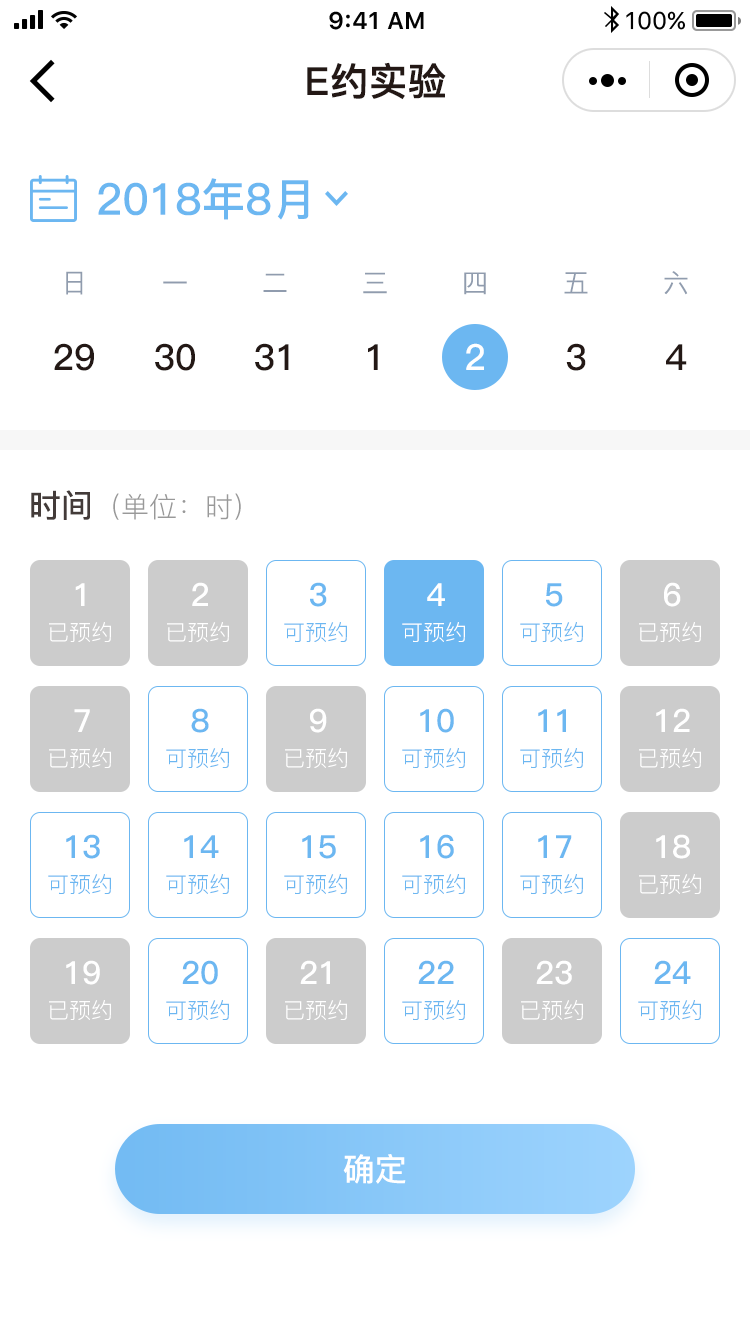
<style>
.page{position:relative;width:750px;height:1334px;background:#ffffff}
.page>*{position:absolute;margin:0}
.t1{font:38px "PingFang-SC-Bold";color:#231815;font-weight:bold}
.t2{font:44px "PingFang-SC-Bold";color:#6cb7f1}
.t3{font:26px "PingFang-SC-Medium";color:#909cae}
.t4{font:36px "PingFang-SC-Bold";color:#231815}
.t5{font:36px "PingFang-SC-Bold";color:#ffffff}
.t6{font:28px "PingFang-SC-Regular";color:#999999}
.t7{font:32px "PingFang-SC-Bold";color:#433b39}
.t8{font:32px "PingFang-SC-Bold";color:#ffffff}
.t9{font:32px "PingFang-SC-Bold";color:#6cb7f1}
.t10{font:22px "PingFang-SC-Regular";color:#ffffff}
.t11{font:22px "PingFang-SC-Regular";color:#6cb7f1}
</style>
<div class="page">
<p class="t1" style="left:307px;top:62px;width:139px;height:38px">E约实验</p>
<p class="t2" style="left:98px;top:178px;width:211px;height:42px">2018年8月</p>
<p class="t3" style="left:66px;top:271px;width:17px;height:24px">日</p>
<p class="t3" style="left:163px;top:281px;width:24px;height:3px">一</p>
<p class="t3" style="left:263px;top:273px;width:24px;height:19px">二</p>
<p class="t3" style="left:363px;top:272px;width:24px;height:22px">三</p>
<p class="t3" style="left:464px;top:272px;width:22px;height:23px">四</p>
<p class="t3" style="left:564px;top:272px;width:24px;height:22px">五</p>
<p class="t3" style="left:664px;top:271px;width:24px;height:24px">六</p>
<p class="t4" style="left:54px;top:343px;width:40px;height:28px">29</p>
<p class="t4" style="left:155px;top:343px;width:40px;height:28px">30</p>
<p class="t4" style="left:255px;top:343px;width:34px;height:28px">31</p>
<p class="t4" style="left:368px;top:344px;width:10px;height:26px">1</p>
<p class="t5" style="left:466px;top:343px;width:18px;height:27px">2</p>
<p class="t4" style="left:566px;top:343px;width:20px;height:28px">3</p>
<p class="t4" style="left:666px;top:344px;width:21px;height:26px">4</p>
<p class="t6" style="left:31px;top:490px;width:210px;height:30px"><span class="t7">时间</span>（单位：时）</p>
<p class="t8" style="left:192px;top:582px;width:16px;height:24px">2</p>
<p class="t9" style="left:310px;top:582px;width:17px;height:25px">3</p>
<p class="t8" style="left:664px;top:582px;width:17px;height:25px">6</p>
<p class="t8" style="left:75px;top:583px;width:10px;height:23px">1</p>
<p class="t8" style="left:427px;top:583px;width:18px;height:23px">4</p>
<p class="t9" style="left:546px;top:583px;width:17px;height:24px">5</p>
<p class="t10" style="left:49px;top:622px;width:62px;height:20px">已预约</p>
<p class="t10" style="left:167px;top:622px;width:62px;height:20px">已预约</p>
<p class="t11" style="left:284px;top:622px;width:63px;height:20px">可预约</p>
<p class="t10" style="left:402px;top:622px;width:63px;height:20px">可预约</p>
<p class="t11" style="left:520px;top:622px;width:63px;height:20px">可预约</p>
<p class="t10" style="left:639px;top:622px;width:62px;height:20px">已预约</p>
<p class="t8" style="left:74px;top:709px;width:16px;height:23px">7</p>
<p class="t9" style="left:191px;top:708px;width:18px;height:25px">8</p>
<p class="t8" style="left:310px;top:708px;width:17px;height:25px">9</p>
<p class="t9" style="left:420px;top:708px;width:34px;height:25px">10</p>
<p class="t9" style="left:538px;top:709px;width:28px;height:23px">11</p>
<p class="t8" style="left:656px;top:708px;width:34px;height:24px">12</p>
<p class="t10" style="left:49px;top:748px;width:62px;height:20px">已预约</p>
<p class="t11" style="left:166px;top:748px;width:63px;height:20px">可预约</p>
<p class="t10" style="left:285px;top:748px;width:62px;height:20px">已预约</p>
<p class="t11" style="left:402px;top:748px;width:63px;height:20px">可预约</p>
<p class="t11" style="left:520px;top:748px;width:63px;height:20px">可预约</p>
<p class="t10" style="left:639px;top:748px;width:62px;height:20px">已预约</p>
<p class="t9" style="left:66px;top:834px;width:34px;height:25px">13</p>
<p class="t9" style="left:184px;top:835px;width:35px;height:23px">14</p>
<p class="t9" style="left:302px;top:835px;width:34px;height:24px">15</p>
<p class="t9" style="left:420px;top:834px;width:34px;height:25px">16</p>
<p class="t9" style="left:538px;top:835px;width:34px;height:23px">17</p>
<p class="t8" style="left:656px;top:834px;width:34px;height:25px">18</p>
<p class="t11" style="left:48px;top:874px;width:63px;height:20px">可预约</p>
<p class="t11" style="left:166px;top:874px;width:63px;height:20px">可预约</p>
<p class="t11" style="left:284px;top:874px;width:63px;height:20px">可预约</p>
<p class="t11" style="left:402px;top:874px;width:63px;height:20px">可预约</p>
<p class="t11" style="left:520px;top:874px;width:63px;height:20px">可预约</p>
<p class="t10" style="left:639px;top:874px;width:62px;height:20px">已预约</p>
<p class="t8" style="left:66px;top:960px;width:34px;height:25px">19</p>
<p class="t9" style="left:182px;top:960px;width:36px;height:25px">20</p>
<p class="t8" style="left:300px;top:960px;width:30px;height:24px">21</p>
<p class="t9" style="left:418px;top:960px;width:36px;height:24px">22</p>
<p class="t8" style="left:536px;top:960px;width:36px;height:25px">23</p>
<p class="t9" style="left:654px;top:960px;width:37px;height:24px">24</p>
<p class="t10" style="left:49px;top:1000px;width:62px;height:20px">已预约</p>
<p class="t11" style="left:166px;top:1000px;width:63px;height:20px">可预约</p>
<p class="t10" style="left:285px;top:1000px;width:62px;height:20px">已预约</p>
<p class="t11" style="left:402px;top:1000px;width:63px;height:20px">可预约</p>
<p class="t10" style="left:521px;top:1000px;width:62px;height:20px">已预约</p>
<p class="t11" style="left:638px;top:1000px;width:63px;height:20px">可预约</p>
<p class="t8" style="left:343px;top:1154px;width:63px;height:30px">确定</p>
</div>
